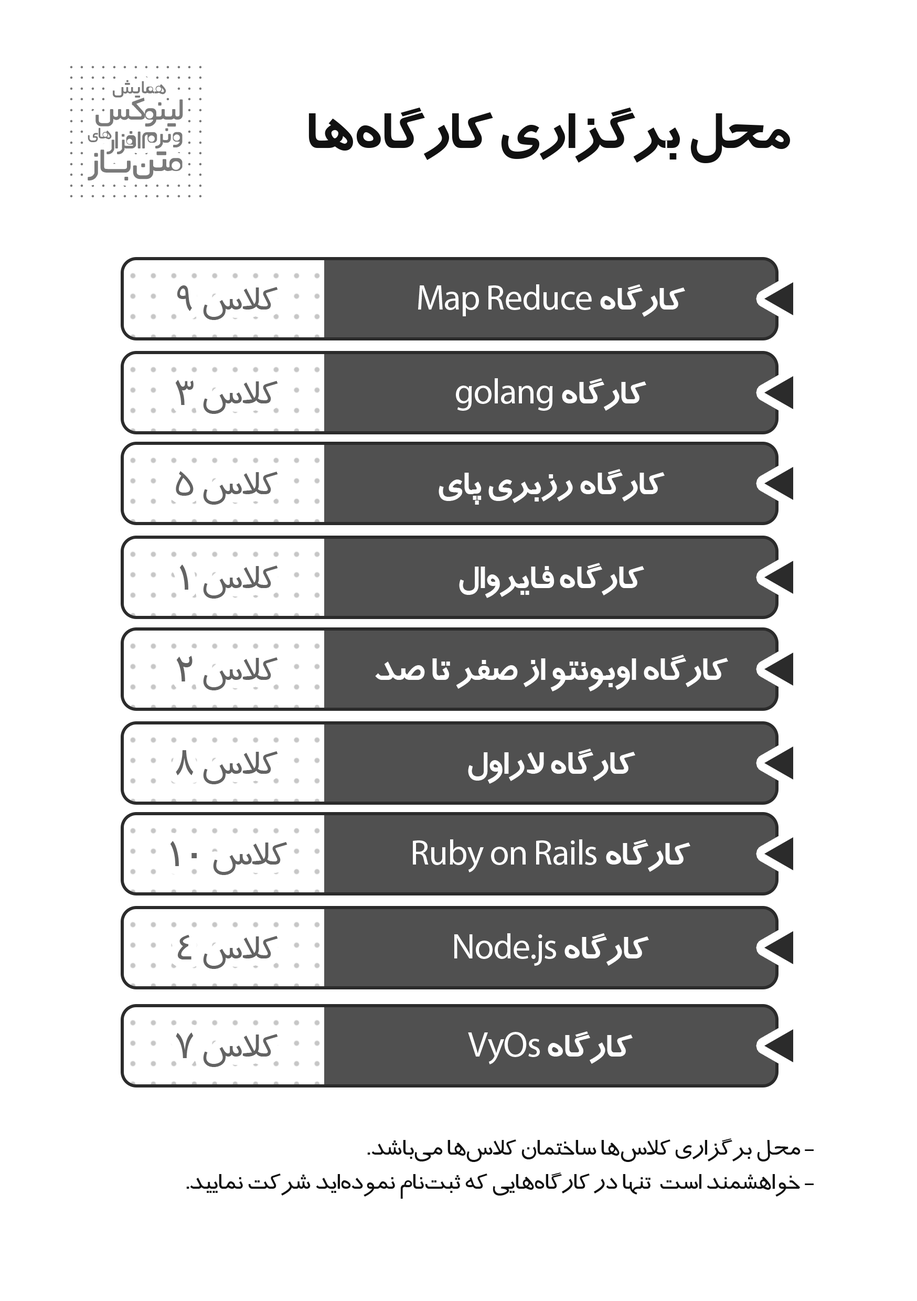
<style>
.page{position:relative;width:917px;height:1301px;background:#ffffff}
.page>*{position:absolute;margin:0}
.t1{font:21.7px "ARezvan";color:#7a7a7a}
.t2{font:35.8px "ARezvan";color:#7a7a7a}
.t3{font:57.4px "BTrafficBold";letter-spacing:-0.02em;color:#111111}
.t4{font:18.8px "ARezvan";color:#7a7a7a}
.t5{font:30px "ARezvan";color:#7a7a7a}
.t6{font:40.8px "ARezvan";color:#7a7a7a}
.t7{font:39.3px "BTraffic";letter-spacing:-0.02em;color:#636363}
.t8{font:35.6px "MyriadPro-Regular";letter-spacing:-0.02em;color:#ffffff}
.t9{font:35.6px "BTrafficBold";letter-spacing:-0.02em;color:#ffffff}
.t10{font:26.2px "BTraffic";letter-spacing:-0.02em;color:#111111}
</style>
<div class="page">
<p class="t1" style="left:113px;top:80px;width:53px;height:18px">همایش</p>
<p class="t2" style="left:95px;top:98px;width:88px;height:29px">لینوکس</p>
<p class="t3" style="left:308px;top:108px;width:482px;height:55px">محل برگزاری کارگاه‌ها</p>
<p class="t4" style="left:88px;top:127px;width:24px;height:15px">های</p>
<p class="t5" style="left:106px;top:131px;width:35px;height:23px">افزار</p>
<p class="t5" style="left:142px;top:128px;width:29px;height:20px">نرم</p>
<p class="t5" style="left:173px;top:132px;width:10px;height:15px">و</p>
<p class="t6" style="left:88px;top:149px;width:43px;height:31px">بـــاز</p>
<p class="t6" style="left:133px;top:151px;width:50px;height:28px">متن</p>
<p class="t7" style="left:177px;top:285px;width:101px;height:35px">کلاس ۹</p>
<p class="t8" style="left:418px;top:284px;width:267px;height:33px"><span class="t9">کارگاه </span>Map Reduce</p>
<p class="t7" style="left:175px;top:380px;width:103px;height:34px">کلاس ۳</p>
<p class="t9" style="left:456px;top:378px;width:190px;height:33px">کارگاه <span class="t8">golang</span></p>
<p class="t7" style="left:176px;top:471px;width:102px;height:34px">کلاس ۵</p>
<p class="t9" style="left:438px;top:469px;width:227px;height:36px">کارگاه رزبری پای</p>
<p class="t7" style="left:179px;top:564px;width:99px;height:34px">کلاس ۱</p>
<p class="t9" style="left:459px;top:563px;width:185px;height:35px">کارگاه فایروال</p>
<p class="t7" style="left:176px;top:656px;width:102px;height:34px">کلاس ۲</p>
<p class="t9" style="left:375px;top:655px;width:353px;height:36px">کارگاه اوبونتو از صفر تا صد</p>
<p class="t7" style="left:176px;top:750px;width:102px;height:34px">کلاس ۸</p>
<p class="t9" style="left:468px;top:748px;width:167px;height:36px">کارگاه لاراول</p>
<p class="t7" style="left:170px;top:841px;width:117px;height:34px">کلاس ۱۰</p>
<p class="t8" style="left:413px;top:839px;width:277px;height:33px"><span class="t9">کارگاه </span>Ruby on Rails</p>
<p class="t7" style="left:177px;top:935px;width:101px;height:34px">کلاس ۴</p>
<p class="t8" style="left:454px;top:933px;width:195px;height:33px"><span class="t9">کارگاه </span>Node.js</p>
<p class="t7" style="left:176px;top:1032px;width:102px;height:35px">کلاس ۷</p>
<p class="t9" style="left:468px;top:1031px;width:165px;height:33px">کارگاه <span class="t8">VyOs</span></p>
<p class="t10" style="left:367px;top:1138px;width:446px;height:24px">- محل برگزاری کلاس‌ها ساختمان کلاس‌ها می‌باشد.</p>
<p class="t10" style="left:186px;top:1172px;width:627px;height:26px">- خواهشمند است  تنها در کارگاه‌هایی که ثبت‌نام نمو‌ده‌اید شرکت نمایید.</p>
</div>
